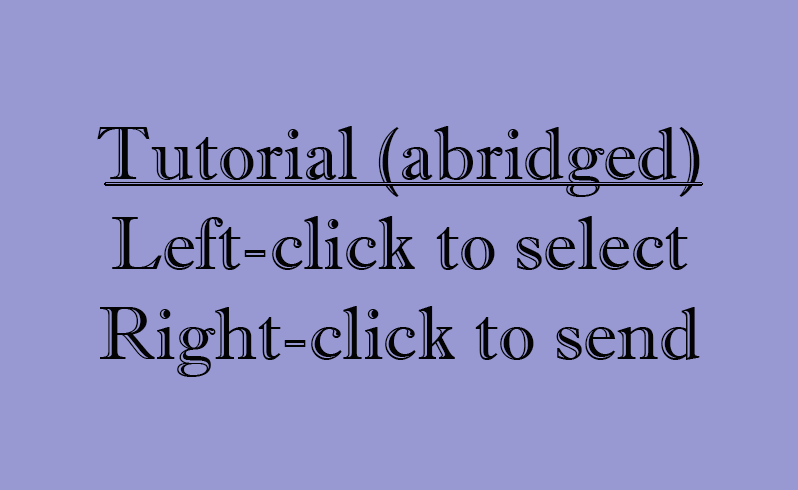
<style>
.page{position:relative;width:798px;height:490px;background:#9898d3}
.page>*{position:absolute;margin:0}
.t1{font:74.8px "ImprintMT-Shadow";color:#030303}
</style>
<div class="page">
<p class="t1" style="left:97px;top:126px;width:603px;height:251px;text-align:center">Tutorial (abridged)<br>Left-click to select<br>Right-click to send</p>
</div>
